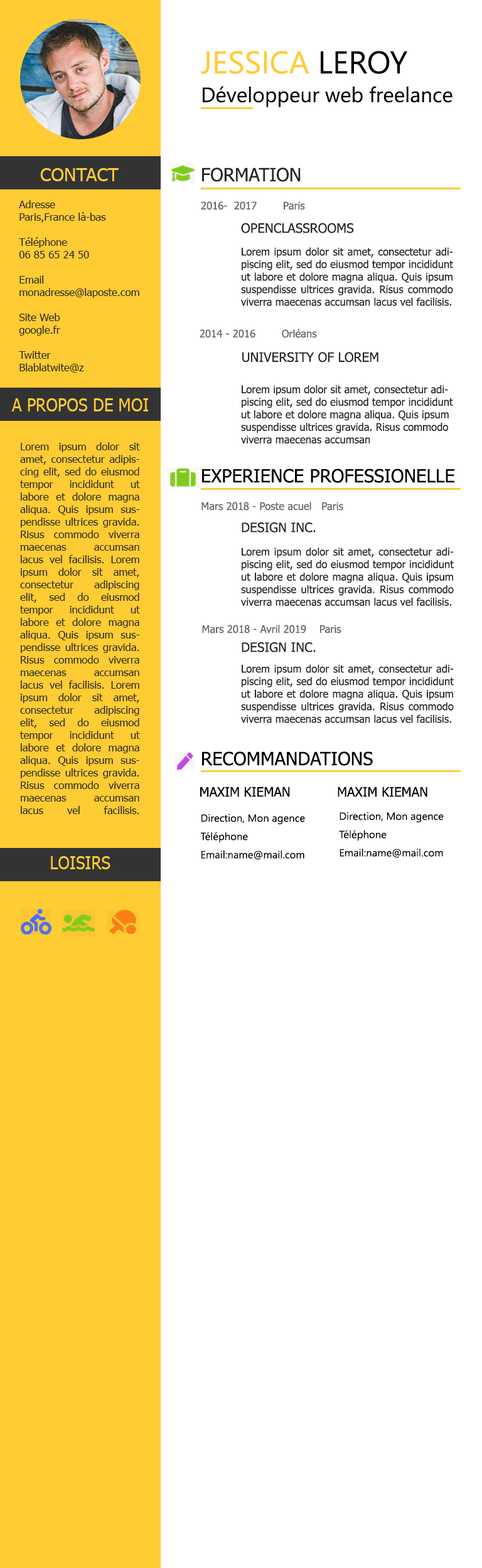
<style>
.page{position:relative;width:482px;height:1568px;background:#ffffff}
.page>*{position:absolute;margin:0}
.t1{font:20.9px/28.7px "YuGothicUI-Regular";color:#000000}
.t2{font:31.4px/26.1px "YuGothicUI-Regular";color:#ffcc33}
.t3{font:31.4px/26.1px "YuGothicUI-Regular";color:#000000}
.t4{font:18.3px "Tahoma";color:#ffcc33}
.t5{font:18.3px "Tahoma";color:#282828}
.t6{font:10.5px "Tahoma";color:#282828}
.t7{font:10.5px "Tahoma";color:#646460}
.t8{font:13.1px "Tahoma";color:#282828}
.t9{font:18.3px "Tahoma";color:#ffcc33;scale:0.9 1}
.t10{font:18.3px "Tahoma";color:#000000}
.t11{font:13.1px "Tahoma";color:#000000}
.t12{font:10.5px/18.3px "YuGothicUI-Regular";color:#000000}
</style>
<div class="page">
<p class="t1" style="left:201px;top:51px;width:251px;height:56px"><span class="t2">JESSICA</span><span class="t3"> LEROY<br></span>Développeur web freelance</p>
<p class="t4" style="left:40px;top:168px;width:79px;height:13px">CONTACT</p>
<p class="t5" style="left:202px;top:167px;width:98px;height:15px">FORMATION</p>
<p class="t6" style="left:19px;top:200px;width:120px;height:173px">Adresse<br>Paris,France là-bas<br><br>Téléphone<br>06 85 65 24 50<br><br>Email<br>monadresse@laposte.com<br><br>Site Web<br>google.fr<br><br>Twitter<br>Blablatwite@z</p>
<p class="t7" style="left:201px;top:201px;width:104px;height:9px">2016-  2017        Paris</p>
<p class="t8" style="left:241px;top:223px;width:113px;height:10px">OPENCLASSROOMS</p>
<p class="t6" style="left:241px;top:247px;width:212px;height:59px;text-align:justify">Lorem ipsum dolor sit amet, consectetur adipiscing elit, sed do eiusmod tempor incididunt ut labore et dolore magna aliqua. Quis ipsum suspendisse ultrices gravida. Risus commodo viverra maecenas accumsan lacus vel facilisis.</p>
<p class="t7" style="left:199px;top:329px;width:118px;height:9px">2014 - 2016        Orléans</p>
<p class="t8" style="left:242px;top:352px;width:136px;height:11px">UNIVERSITY OF LOREM</p>
<p class="t6" style="left:241px;top:385px;width:212px;height:59px">Lorem ipsum dolor sit amet, consectetur adipiscing elit, sed do eiusmod tempor incididunt ut labore et dolore magna aliqua. Quis ipsum suspendisse ultrices gravida. Risus commodo viverra maecenas accumsan</p>
<p class="t9" style="left:12px;top:398px;width:136px;height:13px">A PROPOS DE MOI</p>
<p class="t6" style="left:20px;top:442px;width:120px;height:372px;text-align:justify">Lorem ipsum dolor sit amet, consectetur adipiscing elit, sed do eiusmod tempor incididunt ut labore et dolore magna aliqua. Quis ipsum suspendisse ultrices gravida. Risus commodo viverra maecenas accumsan lacus vel facilisis. Lorem ipsum dolor sit amet, consectetur adipiscing elit, sed do eiusmod tempor incididunt ut labore et dolore magna aliqua. Quis ipsum suspendisse ultrices gravida. Risus commodo viverra maecenas accumsan lacus vel facilisis. Lorem ipsum dolor sit amet, consectetur adipiscing elit, sed do eiusmod tempor incididunt ut labore et dolore magna aliqua. Quis ipsum suspendisse ultrices gravida. Risus commodo viverra maecenas accumsan lacus vel facilisis.</p>
<p class="t10" style="left:202px;top:469px;width:252px;height:14px">EXPERIENCE PROFESSIONELLE</p>
<p class="t7" style="left:201px;top:502px;width:142px;height:9px">Mars 2018 - Poste acuel   Paris</p>
<p class="t8" style="left:241px;top:522px;width:74px;height:10px">DESIGN INC.</p>
<p class="t6" style="left:241px;top:548px;width:212px;height:58px;text-align:justify">Lorem ipsum dolor sit amet, consectetur adipiscing elit, sed do eiusmod tempor incididunt ut labore et dolore magna aliqua. Quis ipsum suspendisse ultrices gravida. Risus commodo viverra maecenas accumsan lacus vel facilisis.</p>
<p class="t7" style="left:202px;top:625px;width:139px;height:8px">Mars 2018 - Avril 2019    Paris</p>
<p class="t8" style="left:241px;top:642px;width:74px;height:10px">DESIGN INC.</p>
<p class="t6" style="left:241px;top:664px;width:212px;height:59px;text-align:justify">Lorem ipsum dolor sit amet, consectetur adipiscing elit, sed do eiusmod tempor incididunt ut labore et dolore magna aliqua. Quis ipsum suspendisse ultrices gravida. Risus commodo viverra maecenas accumsan lacus vel facilisis.</p>
<p class="t10" style="left:202px;top:751px;width:171px;height:15px">RECOMMANDATIONS</p>
<p class="t11" style="left:200px;top:787px;width:90px;height:10px">MAXIM KIEMAN</p>
<p class="t11" style="left:337px;top:787px;width:90px;height:10px">MAXIM KIEMAN</p>
<p class="t12" style="left:200px;top:814px;width:105px;height:46px">Direction, Mon agence<br>Téléphone<br>Email:name@mail.com</p>
<p class="t12" style="left:339px;top:812px;width:104px;height:46px">Direction, Mon agence<br>Téléphone<br>Email:name@mail.com</p>
<p class="t9" style="left:51px;top:856px;width:59px;height:13px">LOISIRS</p>
</div>
